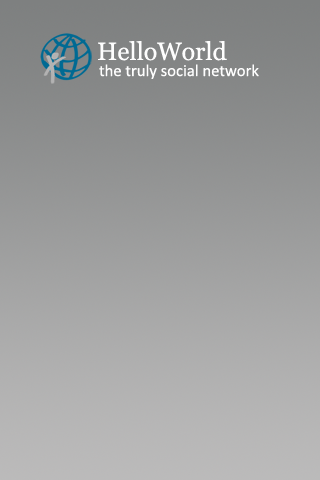
<style>
.page{position:relative;width:320px;height:480px}
.page>*{position:absolute;margin:0}
.t1{font:25px "Georgia";color:#fefefe}
.t2{font:16.7px "Calibri";color:#fefefe}
</style>
<div class="page">
<p class="t1" style="left:98px;top:41px;width:129px;height:20px">HelloWorld</p>
<p class="t2" style="left:99px;top:64px;width:160px;height:15px">the truly social network</p>
</div>
